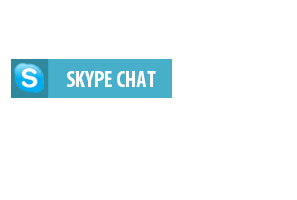
<style>
.page{position:relative;width:297px;height:200px;background:#ffffff}
.page>*{position:absolute;margin:0}
.t1{font:23.3px "MyriadPro-BoldCond";color:#ffffff;scale:0.95 1}
</style>
<div class="page">
<p class="t1" style="left:66px;top:71px;width:90px;height:16px">SKYPE CHAT</p>
</div>
